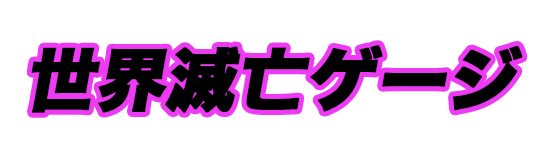
<style>
.page{position:relative;width:551px;height:159px;background:#ffffff}
.page>*{position:absolute;margin:0}
.t1{font:68.2px "HiraKakuStd-W8";color:#000000;font-weight:bold;font-style:italic}
</style>
<div class="page">
<p class="t1" style="left:31px;top:45px;width:492px;height:68px">世界滅亡ゲージ</p>
</div>
